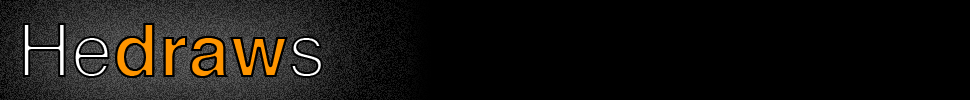
<style>
.page{position:relative;width:970px;height:100px;background:#000000}
.page>*{position:absolute;margin:0}
.t1{font:75px "Helvetica-Bold"}
.t2{font:75px "Helvetica"}
</style>
<div class="page">
<p class="t1" style="left:22px;top:23px;width:301px;height:55px"><span class="t2">He</span>draw<span class="t2">s</span></p>
</div>
